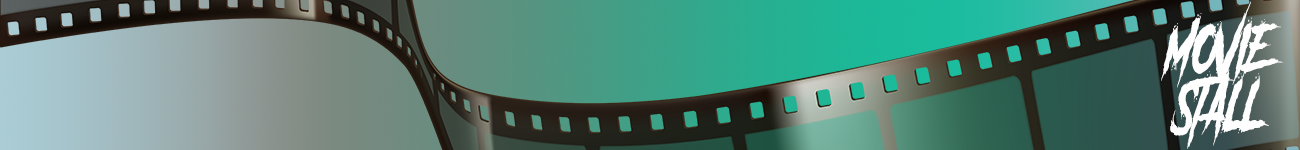
<style>
.page{position:relative;width:1300px;height:150px}
.page>*{position:absolute;margin:0}
.t1{font:58.6px/56.7px "AnotherDangerDemo";letter-spacing:0.03em;color:#fefefe;font-style:italic;scale:0.69 1}
</style>
<div class="page">
<p class="t1" style="left:1161px;top:1px;width:123px;height:148px;text-align:center">MOVIE<br>STALL</p>
</div>
